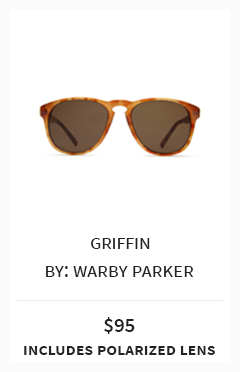
<style>
.page{position:relative;width:240px;height:372px;background:#ffffff}
.page>*{position:absolute;margin:0}
.t1{font:20.8px "SourceSansPro-Regular";letter-spacing:-0.025em;color:#232323;font-variant:small-caps}
.t2{font:20.8px "SourceSansPro-Regular";color:#232323;font-variant:small-caps}
.t3{font:17.8px/22.2px "SourceSansPro-Semibold";color:#232323;font-variant:small-caps}
.t4{font:20.6px/22.2px "SourceSansPro-Semibold";color:#232323}
</style>
<div class="page">
<p class="t1" style="left:91px;top:238px;width:59px;height:11px">griffin</p>
<p class="t2" style="left:46px;top:266px;width:148px;height:11px">by: warby parker</p>
<p class="t3" style="left:24px;top:317px;width:191px;height:38px;text-align:center"><span class="t4">$95<br></span>includes polarized lens</p>
</div>
